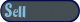
<style>
.page{position:relative;width:80px;height:22px;background:#444d52}
.page>*{position:absolute;margin:0}
.t1{font:30px "FantasticFont";color:#81bbe0}
</style>
<div class="page">
<p class="t1" style="left:4px;top:3px;width:22px;height:15px">Sell</p>
</div>
